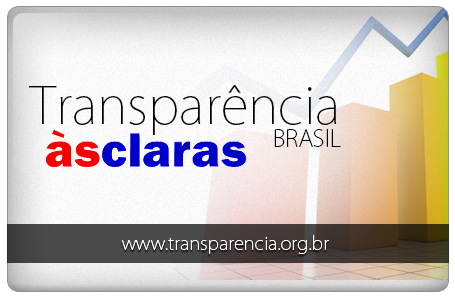
<style>
.page{position:relative;width:455px;height:299px}
.page>*{position:absolute;margin:0}
.t1{font:50.9px "KozGoPro-ExtraLight";color:#000000}
.t2{font:23.2px "KozGoPro-ExtraLight";color:#000000}
.t3{font:18.1px "KozGoPro-ExtraLight";color:#ffffff}
</style>
<div class="page">
<p class="t1" style="left:29px;top:85px;width:308px;height:50px">Transparência</p>
<p class="t2" style="left:274px;top:129px;width:67px;height:18px">BRASIL</p>
<p class="t3" style="left:122px;top:235px;width:207px;height:19px">www.transparencia.org.br</p>
</div>
